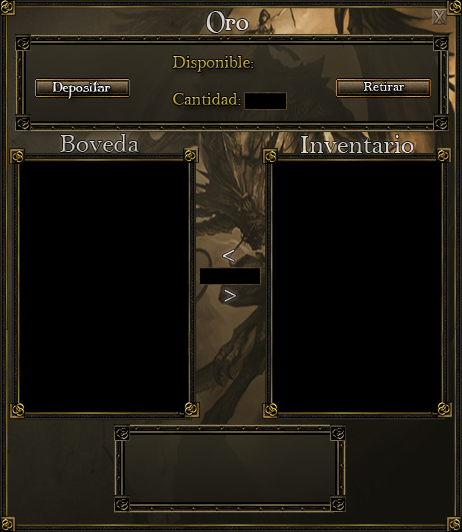
<style>
.page{position:relative;width:462px;height:532px;background:#000000}
.page>*{position:absolute;margin:0}
.t1{font:26.7px "Folkard";color:#e1dbd2}
.t2{font:24px "MyriadPro-Regular"}
.t3{font:17.7px "BellMT"}
.t4{font:14px "Folkard"}
.t5{font:14px "BellMT"}
.t6{font:26.7px "BellMT"}
.t7{font:26.7px "BellMT";color:#d1cfcb}
.t8{font:24px "MyriadPro-Regular";color:#cecece}
</style>
<div class="page">
<p class="t1" style="left:206px;top:11px;width:43px;height:22px">Oro</p>
<p class="t2" style="left:434px;top:11px;width:11px;height:12px">x</p>
<p class="t3" style="left:172px;top:56px;width:82px;height:16px">Disponible:</p>
<p class="t4" style="left:52px;top:81px;width:59px;height:18px">Depositar</p>
<p class="t5" style="left:363px;top:82px;width:42px;height:9px">Retirar</p>
<p class="t3" style="left:173px;top:93px;width:68px;height:12px">Cantidad:</p>
<p class="t6" style="left:60px;top:134px;width:80px;height:18px">Boveda</p>
<p class="t7" style="left:301px;top:135px;width:113px;height:18px">Inventario</p>
<p class="t2" style="left:223px;top:249px;width:12px;height:13px">&lt;</p>
<p class="t8" style="left:224px;top:289px;width:12px;height:13px">&gt;</p>
</div>
